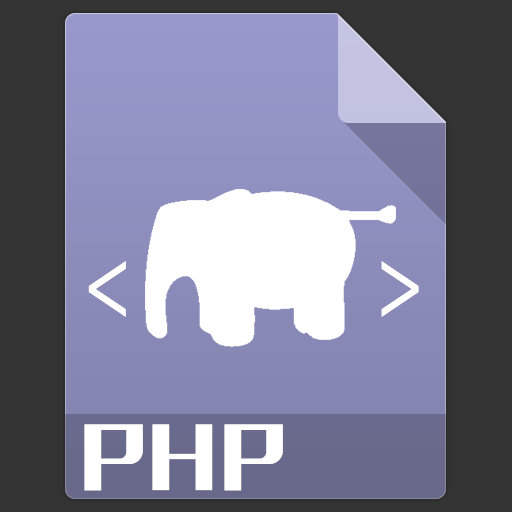
<style>
.page{position:relative;width:512px;height:512px;background:#333333}
.page>*{position:absolute;margin:0}
.t1{font:72px "MFLiHei_Noncommercial-Regular";letter-spacing:0.07em;color:#ffffff}
</style>
<div class="page">
<p class="t1" style="left:84px;top:424px;width:199px;height:67px">PHP</p>
</div>
